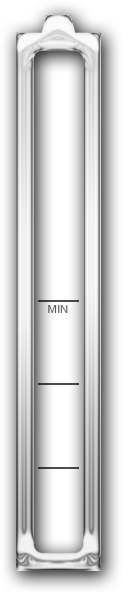
<style>
.page{position:relative;width:123px;height:594px}
.page>*{position:absolute;margin:0}
.t1{font:11.2px "Helvetica";color:#6d6d6d}
</style>
<div class="page">
<p class="t1" style="left:48px;top:305px;width:20px;height:8px">MIN</p>
</div>
